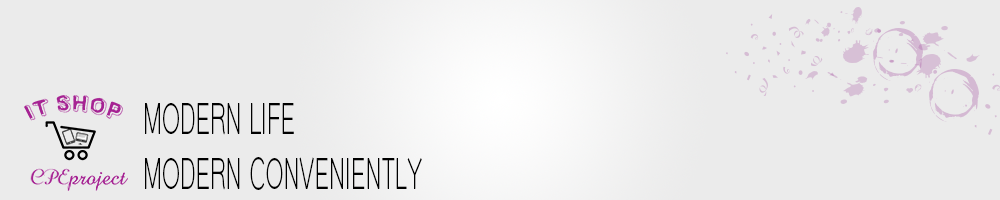
<style>
.page{position:relative;width:1000px;height:200px;background:#ebebeb}
.page>*{position:absolute;margin:0}
.t1{font:46.2px "CSPraJad";color:#000000;scale:0.53 1}
</style>
<div class="page">
<p class="t1" style="left:145px;top:103px;width:277px;height:87px;text-align:right">MODERN LIFE<br>MODERN CONVENIENTLY</p>
</div>
